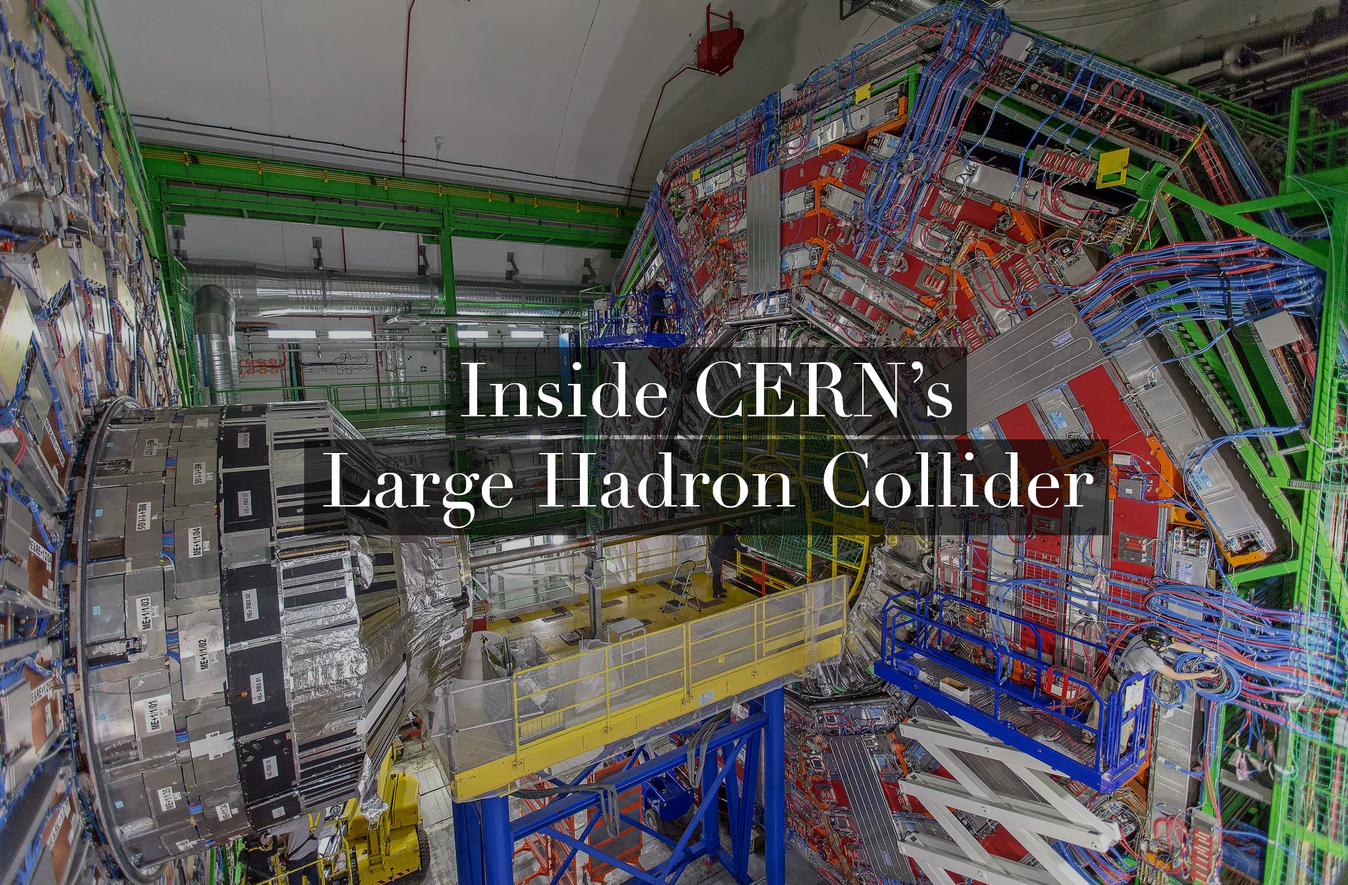
<style>
.page{position:relative;width:1348px;height:885px}
.page>*{position:absolute;margin:0}
.t1{font:75.1px "Didot";color:#ffffff}
</style>
<div class="page">
<p class="t1" style="left:323px;top:361px;width:770px;height:167px;text-align:center">Inside CERN’s<br>Large Hadron Collider</p>
<p class="t1" style="left:323px;top:361px;width:770px;height:167px;text-align:center">Inside CERN’s<br>Large Hadron Collider</p>
</div>
